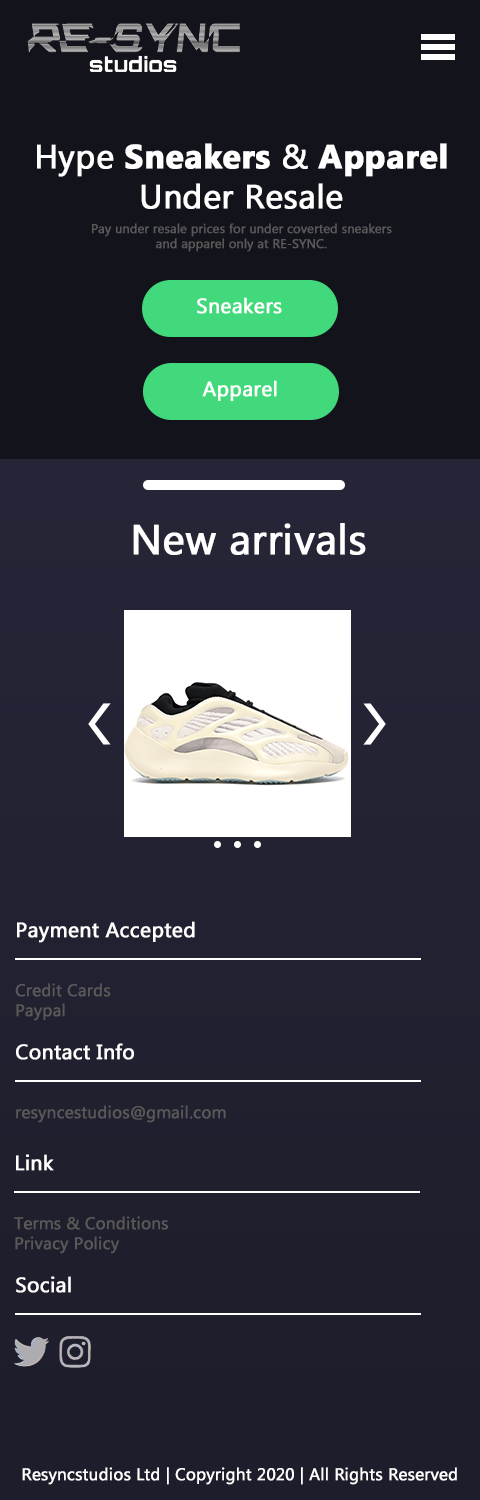
<style>
.page{position:relative;width:480px;height:1500px;background:#13131c}
.page>*{position:absolute;margin:0}
.t1{font:33.3px "MicrosoftTaiLe";color:#ffffff;font-weight:bold}
.t2{font:33.3px "MicrosoftTaiLe-Bold";color:#ffffff;font-weight:bold}
.t3{font:12.5px "MicrosoftTaiLe";color:#595959;font-weight:bold}
.t4{font:20.8px "MicrosoftTaiLe";color:#ffffff;font-weight:bold}
.t5{font:41.7px "MicrosoftTaiLe";color:#ffffff;font-weight:bold}
.t6{font:16.7px "MicrosoftTaiLe";color:#595959;font-weight:bold}
.t7{font:16.7px "MicrosoftTaiLe";color:#ffffff;font-weight:bold}
</style>
<div class="page">
<p class="t1" style="left:37px;top:143px;width:410px;height:66px;text-align:center">Hype <span class="t2">Sneakers</span> &amp; <span class="t2">Apparel</span> Under Resale</p>
<p class="t3" style="left:92px;top:223px;width:300px;height:29px;text-align:center">Pay under resale prices for under coverted sneakers and apparel only at RE-SYNC.</p>
<p class="t4" style="left:197px;top:297px;width:85px;height:17px">Sneakers</p>
<p class="t4" style="left:202px;top:380px;width:75px;height:21px">Apparel</p>
<p class="t5" style="left:133px;top:523px;width:233px;height:32px">New arrivals</p>
<p class="t4" style="left:17px;top:921px;width:178px;height:22px">Payment Accepted</p>
<p class="t6" style="left:15px;top:983px;width:96px;height:38px">Credit Cards<br>Paypal</p>
<p class="t4" style="left:16px;top:1043px;width:118px;height:17px">Contact Info</p>
<p class="t6" style="left:16px;top:1105px;width:210px;height:18px">resyncestudios@gmail.com</p>
<p class="t4" style="left:16px;top:1154px;width:38px;height:17px">Link</p>
<p class="t6" style="left:14px;top:1216px;width:154px;height:38px">Terms &amp; Conditions<br>Privacy Policy</p>
<p class="t4" style="left:16px;top:1276px;width:55px;height:17px">Social</p>
<p class="t7" style="left:22px;top:1467px;width:435px;height:18px">Resyncstudios Ltd | Copyright 2020 | All Rights Reserved</p>
</div>
